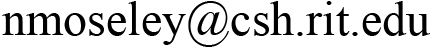
<style>
.page{position:relative;width:432px;height:48px;background:#ffffff}
.page>*{position:absolute;margin:0}
.t1{font:48px "TimesNewRomanPSMT";color:#000000}
</style>
<div class="page">
<p class="t1" style="left:2px;top:1px;width:428px;height:46px">nmoseley@csh.rit.edu</p>
</div>
